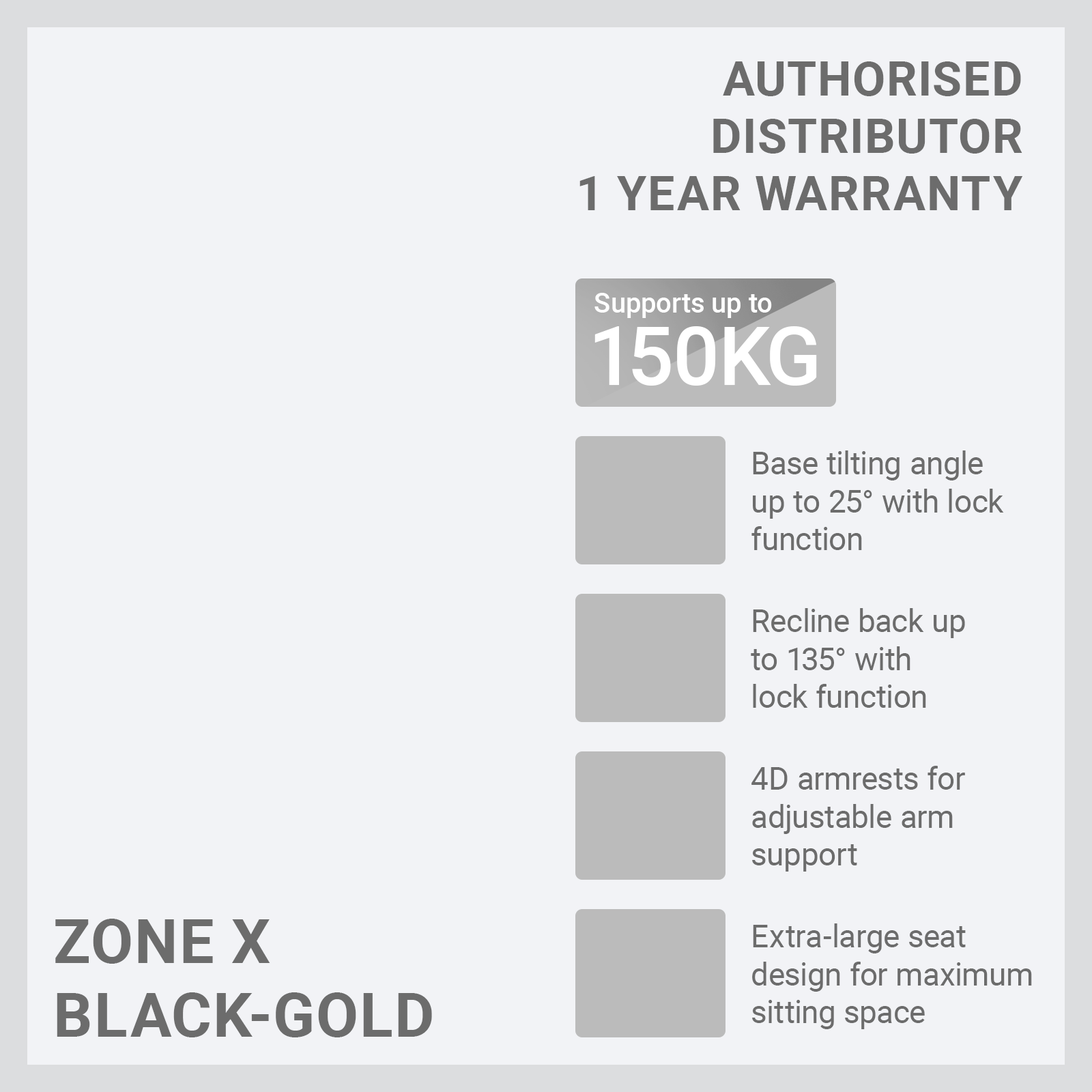
<style>
.page{position:relative;width:1092px;height:1092px;background:#f2f3f6}
.page>*{position:absolute;margin:0}
.t1{font:47.8px "Roboto-Bold";color:#6c6c6c;text-transform:uppercase}
.t2{font:27.3px "Roboto-Medium";color:#ffffff}
.t3{font:81.9px "Roboto-Medium";color:#ffffff}
.t4{font:31.4px "Roboto-Regular";color:#6c6c6c}
.t5{font:61.4px "Roboto-Bold";color:#6c6c6c;text-transform:uppercase}
</style>
<div class="page">
<p class="t1" style="left:579px;top:61px;width:444px;height:149px;text-align:right">Authorised<br>distributor<br>1 year warranty</p>
<p class="t2" style="left:594px;top:293px;width:178px;height:25px">Supports up to</p>
<p class="t3" style="left:594px;top:326px;width:223px;height:60px">150KG</p>
<p class="t4" style="left:751px;top:450px;width:253px;height:100px">Base tilting angle<br>up to 25° with lock<br>function</p>
<p class="t4" style="left:751px;top:608px;width:214px;height:100px">Recline back up<br>to 135° with<br>lock function</p>
<p class="t4" style="left:751px;top:766px;width:214px;height:106px">4D armrests for<br>adjustable arm<br>support</p>
<p class="t5" style="left:55px;top:919px;width:377px;height:118px">Zone x<br>black-gold</p>
<p class="t4" style="left:752px;top:923px;width:280px;height:106px">Extra-large seat<br>design for maximum<br>sitting space</p>
</div>
